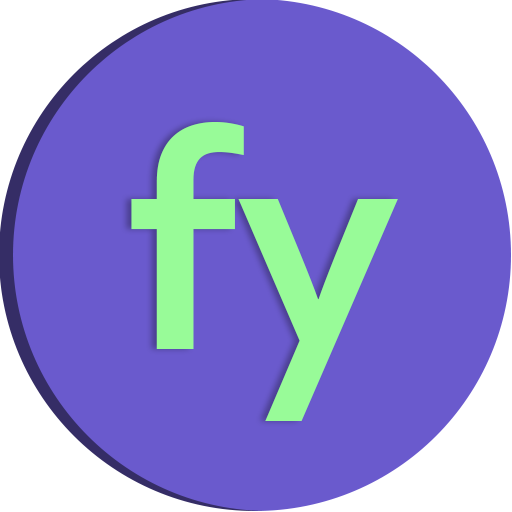
<style>
.page{position:relative;width:512px;height:512px;background:#6a5acd}
.page>*{position:absolute;margin:0}
.t1{font:315.9px "Corbel-Bold";letter-spacing:0.01em;color:#98fb98}
</style>
<div class="page">
<p class="t1" style="left:131px;top:122px;width:267px;height:299px">fy</p>
</div>
